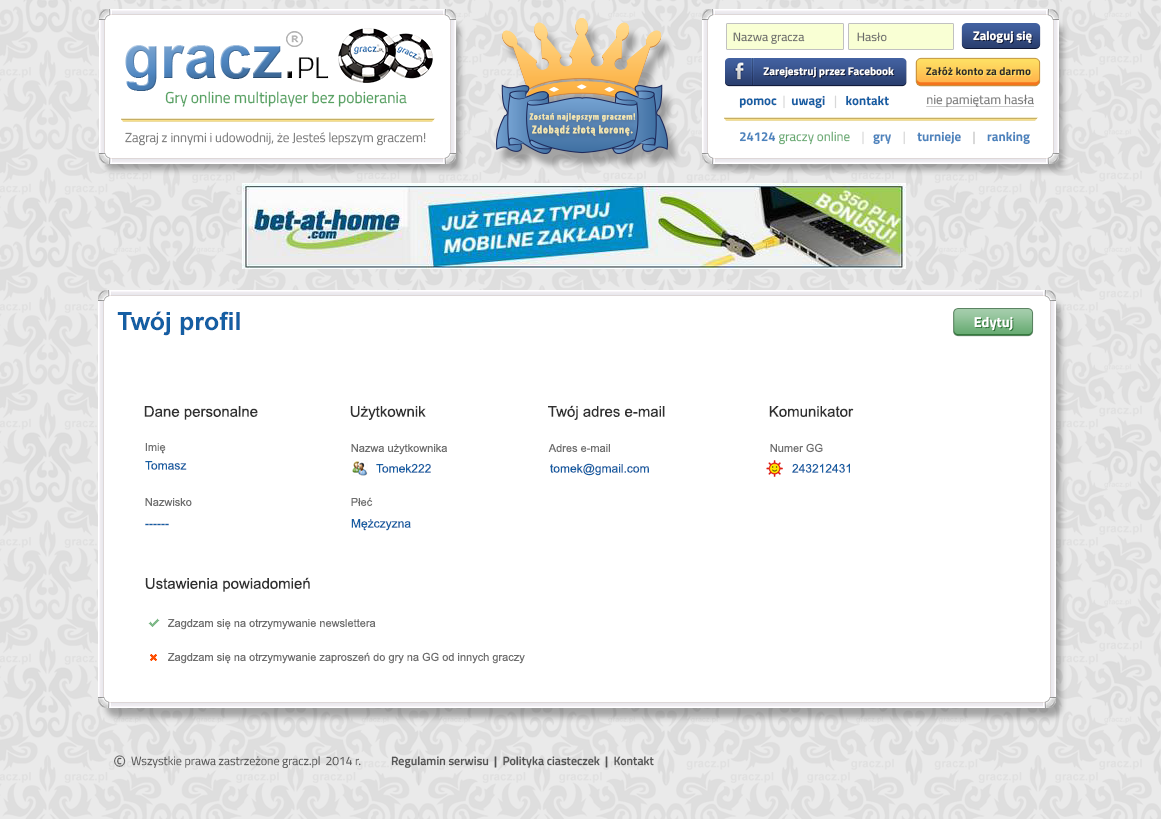
<style>
.page{position:relative;width:1161px;height:819px;background:#ffffff}
.page>*{position:absolute;margin:0}
.t1{font:12px "TitilliumWeb-Regular";color:#6a6a6a}
.t2{font:12.5px "TitilliumWeb-Bold";color:#ffffff}
.t3{font:11.1px "TitilliumWeb-Bold";color:#ffffff}
.t4{font:11.1px "TitilliumWeb-Bold";color:#292929}
.t5{font:15.7px "TitilliumWeb-Regular";color:#56a262}
.t6{font:13px "TitilliumWeb-Bold";color:#155ea3}
.t7{font:13px "TitilliumWeb-Regular";color:#d8d8d8}
.t8{font:13px "TitilliumWeb-Regular";color:#797979;text-decoration:underline}
.t9{font:9.4px "MyriadPro-BoldCond";letter-spacing:0.06em;color:#efe3af}
.t10{font:11.4px "MyriadPro-BoldCond";letter-spacing:0.06em;color:#efe3af}
.t11{font:13px "TitilliumWeb-Light";color:#787878}
.t12{font:13px "TitilliumWeb-Regular";color:#66a970}
.t13{font:13px "TitilliumWeb-Bold";color:#4c83bd}
.t14{font:13px "TitilliumWeb-Regular";color:#bdbdbd}
.t15{font:25px "Arial-BoldMT";color:#155ea3}
.t16{font:14.4px "TitilliumWeb-Bold";color:#ffffff}
.t17{font:15px "ArialMT";color:#303030}
.t18{font:11px "ArialMT";color:#6e6e6e}
.t19{font:12px "ArialMT";color:#155ea3}
.t20{font:20.5px "TitilliumWeb-Light";color:#535353}
.t21{font:12px "TitilliumWeb-Light";color:#535353}
.t22{font:12px "TitilliumWeb-SemiBold";color:#535353}
</style>
<div class="page">
<p class="t1" style="left:733px;top:32px;width:72px;height:12px">Nazwa gracza</p>
<p class="t1" style="left:857px;top:32px;width:30px;height:10px">Hasło</p>
<p class="t2" style="left:973px;top:31px;width:59px;height:12px">Zaloguj się</p>
<p class="t3" style="left:763px;top:67px;width:131px;height:11px">Zarejestruj przez Facebook</p>
<p class="t4" style="left:926px;top:66px;width:105px;height:10px">Załóż konto za darmo</p>
<p class="t5" style="left:165px;top:91px;width:242px;height:16px">Gry online multiplayer bez pobierania</p>
<p class="t6" style="left:739px;top:95px;width:150px;height:14px">pomoc <span class="t7"> |  </span>uwagi   <span class="t7">|   </span>kontakt</p>
<p class="t8" style="left:926px;top:94px;width:108px;height:14px">nie pamiętam hasła</p>
<p class="t9" style="left:529px;top:113px;width:107px;height:23px;text-align:center">Zostań najlepszym graczem!<br><span class="t10">Zdobądź złotą koronę.</span></p>
<p class="t11" style="left:125px;top:132px;width:301px;height:14px">Zagraj z innymi i udowodnij, że Jesteś lepszym graczem!</p>
<p class="t12" style="left:739px;top:131px;width:291px;height:14px"><span class="t13">24124 </span>graczy online    <span class="t7">|   </span><span class="t13">gry    </span><span class="t7">|   </span><span class="t13"> turnieje    </span><span class="t14">|    </span><span class="t13">ranking</span></p>
<p class="t15" style="left:117px;top:311px;width:123px;height:25px">Twój profil</p>
<p class="t16" style="left:974px;top:316px;width:39px;height:15px">Edytuj</p>
<p class="t17" style="left:144px;top:406px;width:114px;height:14px">Dane personalne</p>
<p class="t17" style="left:350px;top:406px;width:76px;height:14px">Użytkownik</p>
<p class="t17" style="left:548px;top:405px;width:117px;height:15px">Twój adres e-mail</p>
<p class="t17" style="left:769px;top:406px;width:85px;height:11px">Komunikator</p>
<p class="t18" style="left:145px;top:443px;width:21px;height:11px">Imię</p>
<p class="t18" style="left:351px;top:444px;width:96px;height:11px">Nazwa użytkownika</p>
<p class="t18" style="left:548px;top:444px;width:62px;height:9px">Adres e-mail</p>
<p class="t18" style="left:770px;top:443px;width:53px;height:10px">Numer GG</p>
<p class="t19" style="left:145px;top:461px;width:42px;height:9px">Tomasz</p>
<p class="t19" style="left:376px;top:463px;width:55px;height:10px">Tomek222</p>
<p class="t19" style="left:550px;top:463px;width:99px;height:13px">tomek@gmail.com</p>
<p class="t19" style="left:792px;top:463px;width:58px;height:10px">243212431</p>
<p class="t18" style="left:351px;top:497px;width:22px;height:10px">Płeć</p>
<p class="t18" style="left:145px;top:498px;width:47px;height:9px">Nazwisko</p>
<p class="t19" style="left:351px;top:519px;width:60px;height:12px">Mężczyzna</p>
<p class="t19" style="left:145px;top:523px;width:24px;height:3px">------</p>
<p class="t17" style="left:145px;top:577px;width:165px;height:15px">Ustawienia powiadomień</p>
<p class="t18" style="left:168px;top:619px;width:208px;height:11px">Zagdzam się na otrzymywanie newslettera</p>
<p class="t18" style="left:168px;top:652px;width:357px;height:12px">Zagdzam się na otrzymywanie zaproszeń do gry na GG od innych graczy</p>
<p class="t20" style="left:114px;top:755px;width:12px;height:12px">©</p>
<p class="t21" style="left:131px;top:756px;width:230px;height:12px">Wszystkie prawa zastrzeżone gracz.pl  2014 r.</p>
<p class="t22" style="left:391px;top:756px;width:263px;height:12px">Regulamin serwisu  |  Polityka ciasteczek  |  Kontakt</p>
</div>
